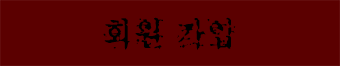
<style>
.page{position:relative;width:340px;height:66px;background:#5b0000}
.page>*{position:absolute;margin:0}
.t1{font:33.9px "YDIGomM";color:#000000}
</style>
<div class="page">
<p class="t1" style="left:103px;top:17px;width:133px;height:33px">회원 가입</p>
</div>
